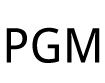
<style>
.page{position:relative;width:105px;height:83px;background:#ffffff}
.page>*{position:absolute;margin:0}
.t1{font:47.9px "DroidSans";color:#000000}
</style>
<div class="page">
<p class="t1" style="left:6px;top:27px;width:94px;height:36px">PGM</p>
</div>
